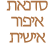
<style>
.page{position:relative;width:55px;height:43px;background:#ffffff}
.page>*{position:absolute;margin:0}
.t1{font:18px/8px "MyriadHebrew-Regular";letter-spacing:-0.09em;color:#ad7344}
.t2{font:18px/11px "MyriadHebrew-Regular";letter-spacing:-0.09em;color:#ad7344}
</style>
<div class="page">
<p class="t1" style="left:6px;top:0px;width:42px;height:43px;text-align:center"><span class="t2"><br></span>תאנדס<br><br>רופיא<br><br>תישיא</p>
</div>
